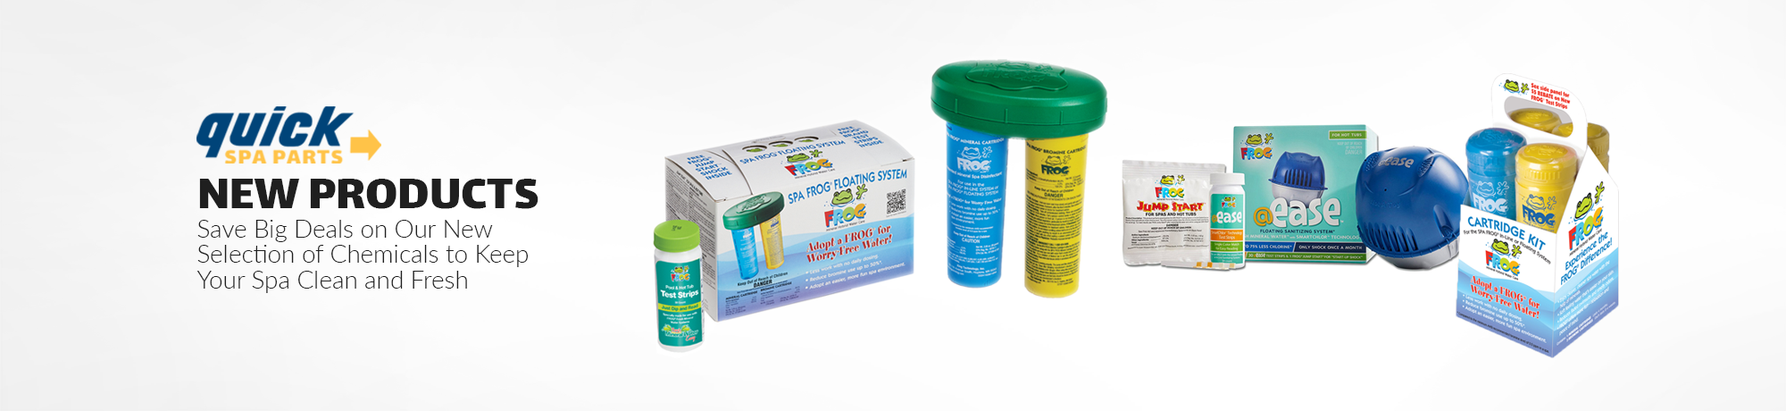
<style>
.page{position:relative;width:1786px;height:411px}
.page>*{position:absolute;margin:0}
.t1{font:12.1px "Lalezar-Regular";color:#1f1f1f}
.t2{font:5.9px/25.5px "Lato-Light";color:#1f1f1f}
</style>
<div class="page">
<p class="t1" style="left:199px;top:179px;width:339px;height:30px">NEW PRODUCTS</p>
<p class="t2" style="left:196px;top:220px;width:333px;height:73px">Save Big Deals on Our New <br>Selection of Chemicals to Keep <br>Your Spa Clean and Fresh</p>
</div>
